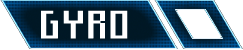
<style>
.page{position:relative;width:243px;height:50px;background:#ffffff}
.page>*{position:absolute;margin:0}
.t1{font:36.2px "Starcadia";color:#ffffff;font-weight:bold;scale:0.95 1}
</style>
<div class="page">
<p class="t1" style="left:41px;top:10px;width:87px;height:29px">GYRO</p>
</div>
